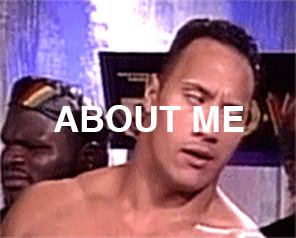
<style>
.page{position:relative;width:296px;height:238px}
.page>*{position:absolute;margin:0}
.t1{font:36px "Helvetica-Bold";color:#ffffff}
</style>
<div class="page">
<p class="t1" style="left:53px;top:105px;width:191px;height:27px">ABOUT ME</p>
</div>
